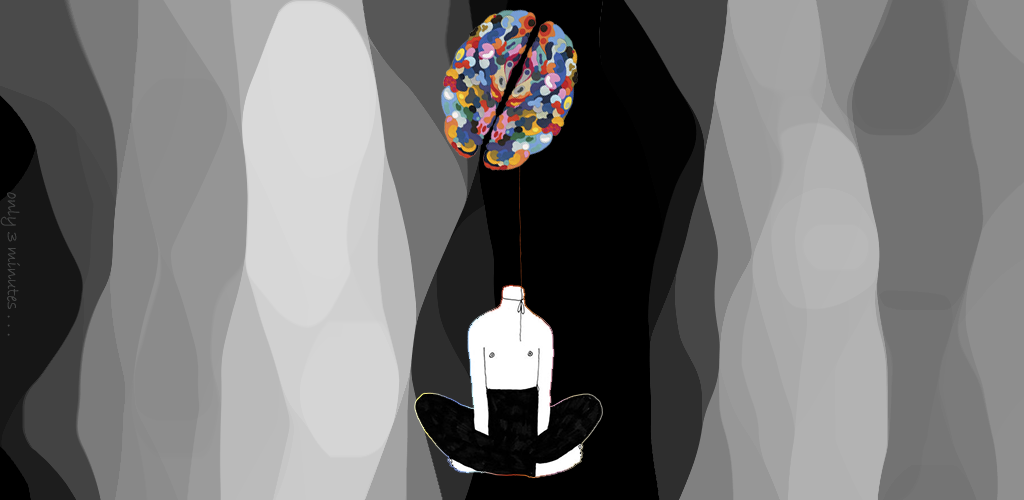
<style>
.page{position:relative;width:1024px;height:500px}
.page>*{position:absolute;margin:0}
.t1{font:18px "BradleyHandITC";color:#474848}
</style>
<div class="page">
<p class="t1" style="left:0px;top:192px;width:20px;height:144px;rotate:90deg">only 3 minutes . . .</p>
</div>
